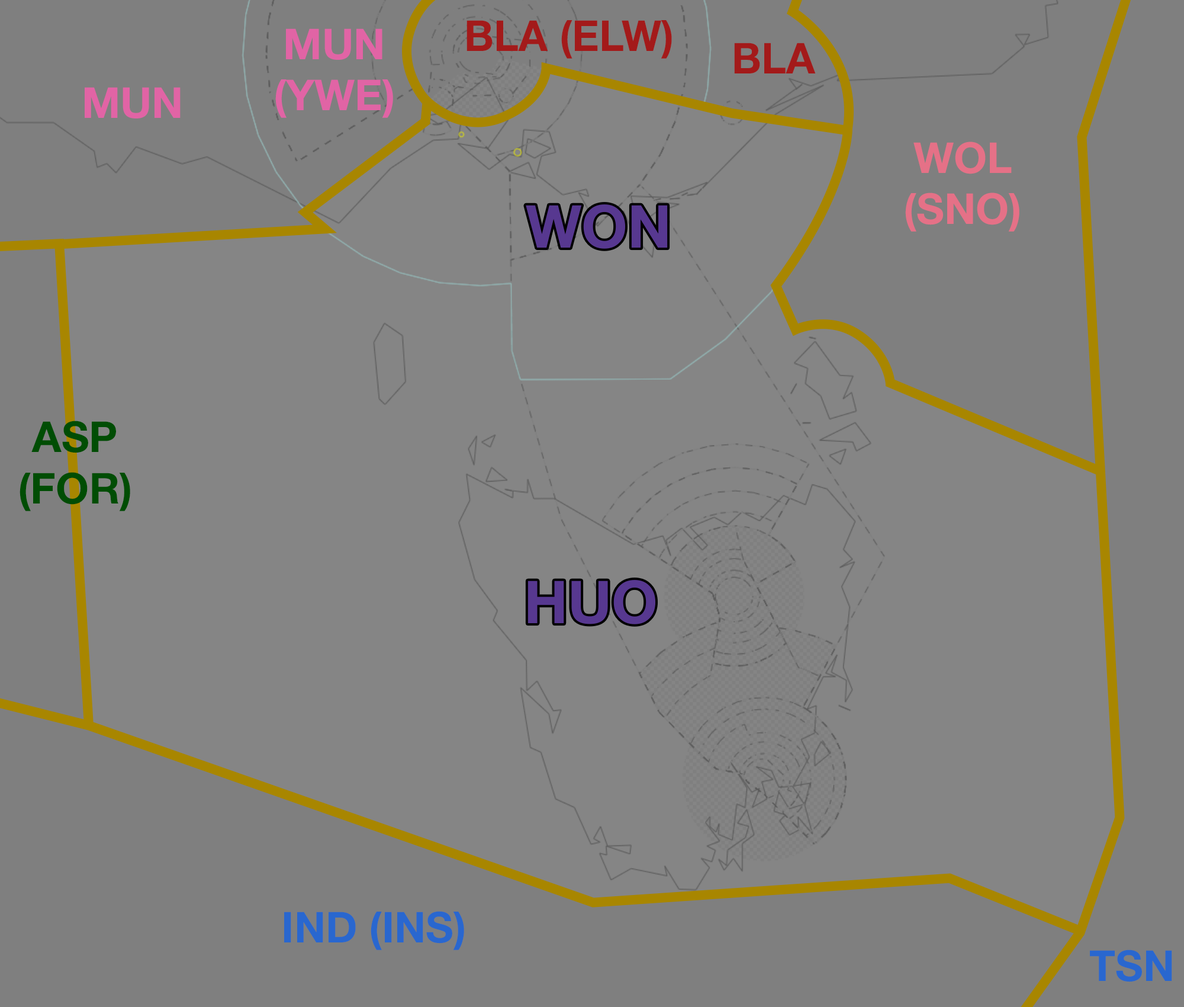
<style>
.page{position:relative;width:1184px;height:1007px;background:#858585}
.page>*{position:absolute;margin:0}
.t1{font:42.6px "HelveticaNeue-Bold";color:#e164a5}
.t2{font:42.6px "HelveticaNeue-Bold";color:#a31a1a}
.t3{font:42.6px "HelveticaNeue-Bold";color:#e57187}
.t4{font:59.2px "HelveticaNeue-Bold";color:#573890}
.t5{font:42.6px "HelveticaNeue-Bold";color:#004d04}
.t6{font:42.6px "HelveticaNeue-Bold";color:#2967cf}
</style>
<div class="page">
<p class="t1" style="left:275px;top:28px;width:118px;height:90px;text-align:center">MUN<br>(YWE)</p>
<p class="t2" style="left:467px;top:20px;width:205px;height:39px">BLA (ELW)</p>
<p class="t2" style="left:734px;top:43px;width:82px;height:30px">BLA</p>
<p class="t1" style="left:85px;top:87px;width:96px;height:31px">MUN</p>
<p class="t3" style="left:905px;top:142px;width:115px;height:90px;text-align:center">WOL<br>(SNO)</p>
<p class="t4" style="left:526px;top:204px;width:142px;height:45px">WON</p>
<p class="t5" style="left:20px;top:420px;width:110px;height:91px;text-align:center">ASP<br>(FOR)</p>
<p class="t4" style="left:528px;top:580px;width:128px;height:44px">HUO</p>
<p class="t6" style="left:284px;top:911px;width:180px;height:39px">IND (INS)</p>
<p class="t6" style="left:1090px;top:949px;width:83px;height:33px">TSN</p>
</div>
